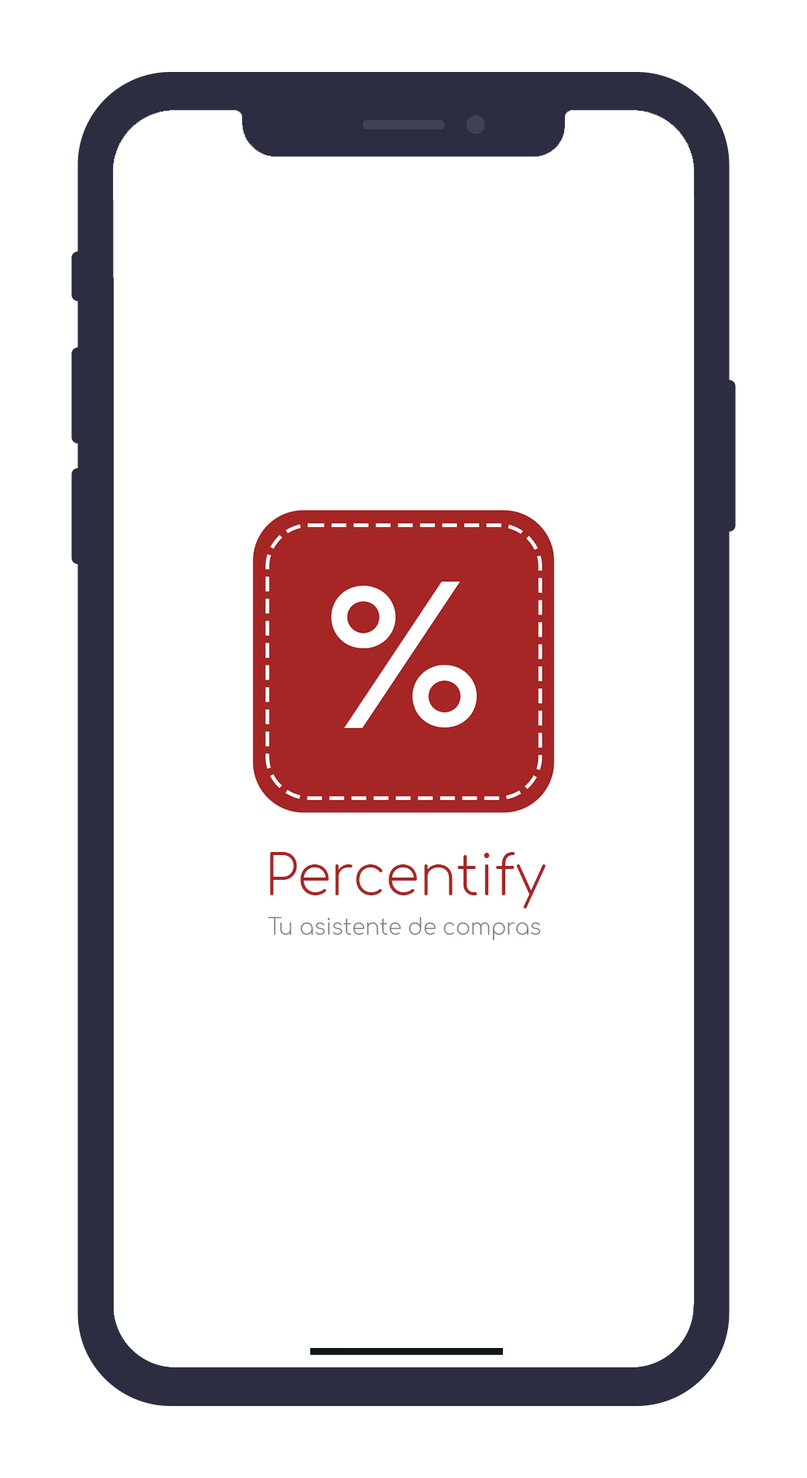
<style>
.page{position:relative;width:807px;height:1478px;background:#ffffff}
.page>*{position:absolute;margin:0}
.t1{font:55.5px "Comfortaa-Light";color:#a62626}
.t2{font:21.6px "Comfortaa-Light";color:#877e7e}
</style>
<div class="page">
<p class="t1" style="left:270px;top:852px;width:275px;height:56px">Percentify</p>
<p class="t2" style="left:268px;top:917px;width:273px;height:23px">Tu asistente de compras</p>
</div>
